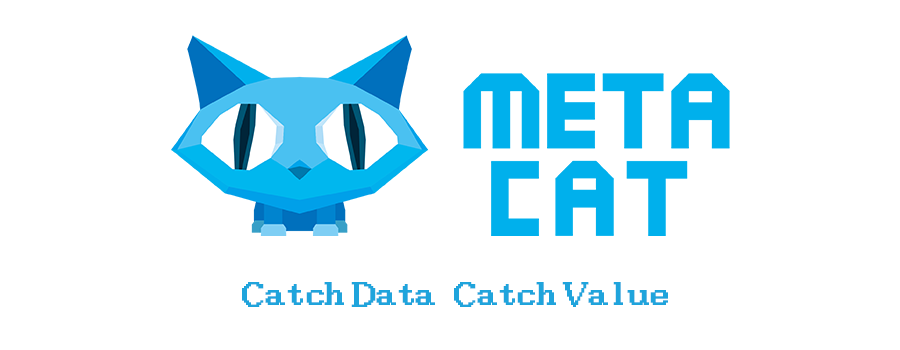
<style>
.page{position:relative;width:900px;height:350px;background:#ffffff}
.page>*{position:absolute;margin:0}
.t1{font:32.8px "IPix";letter-spacing:-0.025em;color:#1fa4dc;font-weight:bold}
</style>
<div class="page">
<p class="t1" style="left:242px;top:282px;width:102px;height:25px">Catch</p>
<p class="t1" style="left:351px;top:282px;width:84px;height:25px">Data</p>
<p class="t1" style="left:454px;top:282px;width:102px;height:25px">Catch</p>
<p class="t1" style="left:562px;top:282px;width:106px;height:25px">Value</p>
</div>
